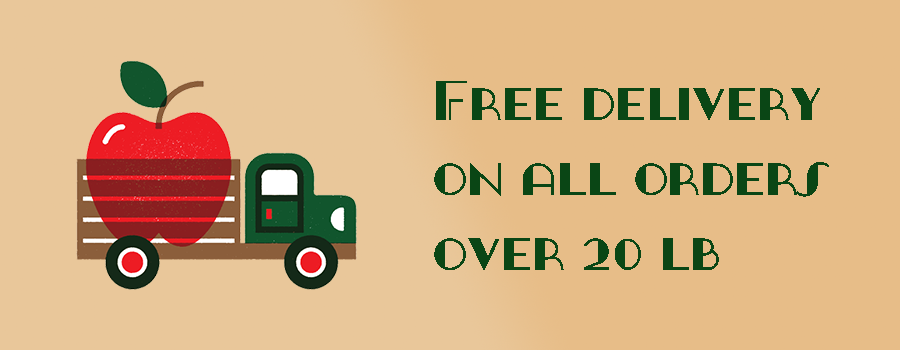
<style>
.page{position:relative;width:900px;height:350px;background:#e7bd88}
.page>*{position:absolute;margin:0}
.t1{font:62.5px "GangueOuais";color:#0a4615}
</style>
<div class="page">
<p class="t1" style="left:434px;top:81px;width:395px;height:189px">Free delivery <br>on all orders <br>over 20 lb</p>
</div>
